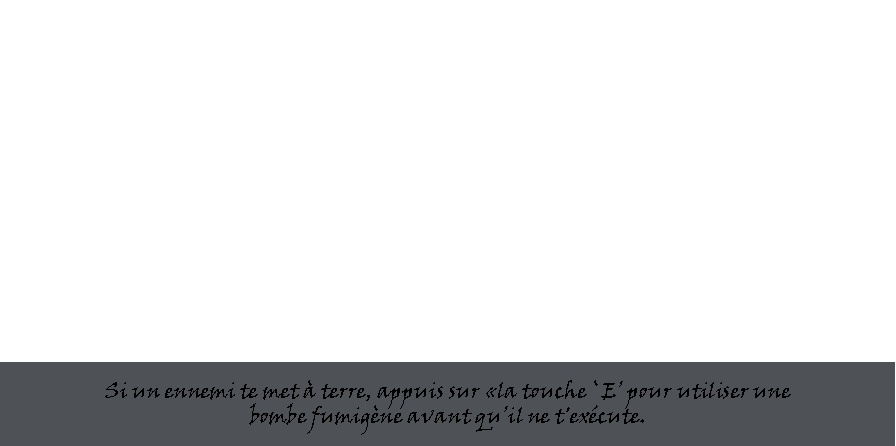
<style>
.page{position:relative;width:896px;height:446px;background:#ffffff}
.page>*{position:absolute;margin:0}
.t1{font:21px "VinerHandITC";color:#000000}
</style>
<div class="page">
<p class="t1" style="left:105px;top:380px;width:686px;height:55px;text-align:center">Si un ennemi te met à terre, appuis sur «la touche `E’ pour utiliser une bombe fumigène avant qu’il ne t'exécute.</p>
</div>
